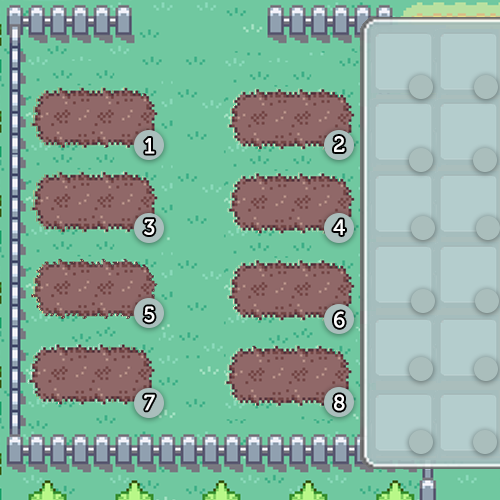
<style>
.page{position:relative;width:500px;height:500px;background:#70c8a0}
.page>*{position:absolute;margin:0}
.t1{font:21.7px "Museo-500";letter-spacing:0.08em;color:#ffffff;scale:0.96 1}
</style>
<div class="page">
<p class="t1" style="left:334px;top:136px;width:11px;height:16px">2</p>
<p class="t1" style="left:145px;top:138px;width:10px;height:16px">1</p>
<p class="t1" style="left:144px;top:219px;width:11px;height:16px">3</p>
<p class="t1" style="left:333px;top:219px;width:12px;height:16px">4</p>
<p class="t1" style="left:144px;top:306px;width:11px;height:17px">5</p>
<p class="t1" style="left:334px;top:311px;width:11px;height:17px">6</p>
<p class="t1" style="left:144px;top:394px;width:11px;height:17px">7</p>
<p class="t1" style="left:334px;top:394px;width:11px;height:17px">8</p>
</div>
